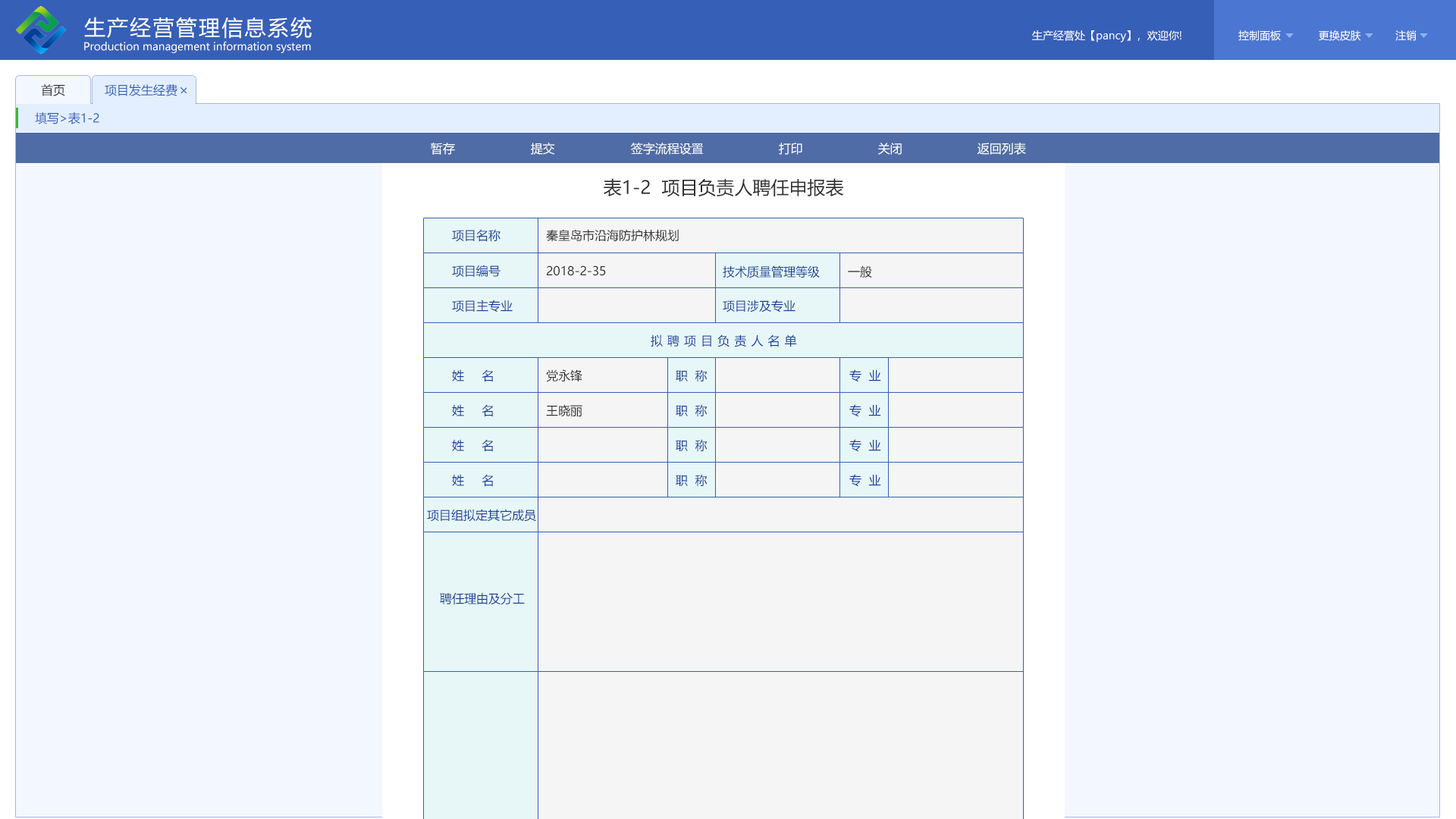
<style>
.page{position:relative;width:1456px;height:819px;background:#f3f7ff}
.page>*{position:absolute;margin:0}
.t1{font:21.2px "MicrosoftYaHei";letter-spacing:0.08em;color:#ffffff}
.t2{font:10.6px "MicrosoftYaHei";color:#ffffff}
.t3{font:12.1px "MicrosoftYaHei";color:#333333}
.t4{font:12.1px "MicrosoftYaHei";color:#365fb7}
.t5{font:12.1px "MicrosoftYaHei";color:#ffffff}
.t6{font:18.2px "MicrosoftYaHei";color:#313131}
.t7{font:12.1px "MicrosoftYaHei";color:#18419b}
.t8{font:12.1px "MicrosoftYaHei";color:#313131}
.t9{font:12.1px "MicrosoftYaHei";letter-spacing:0.38em;color:#18419b}
</style>
<div class="page">
<p class="t1" style="left:84px;top:17px;width:228px;height:22px">生产经营管理信息系统</p>
<p class="t2" style="left:84px;top:41px;width:227px;height:12px">Production management information system</p>
<p class="t2" style="left:1032px;top:30px;width:149px;height:12px">生产经营处【pancy】，欢迎你!</p>
<p class="t2" style="left:1238px;top:30px;width:179px;height:11px">控制面板            更换皮肤           注销</p>
<p class="t3" style="left:41px;top:84px;width:24px;height:12px">首页</p>
<p class="t4" style="left:105px;top:84px;width:72px;height:12px">项目发生经费</p>
<p class="t4" style="left:35px;top:112px;width:64px;height:12px">填写&gt;表1-2</p>
<p class="t5" style="left:431px;top:143px;width:24px;height:12px">暂存</p>
<p class="t5" style="left:531px;top:143px;width:24px;height:12px">提交</p>
<p class="t5" style="left:631px;top:143px;width:73px;height:12px">签字流程设置</p>
<p class="t5" style="left:779px;top:143px;width:23px;height:12px">打印</p>
<p class="t5" style="left:878px;top:143px;width:24px;height:12px">关闭</p>
<p class="t5" style="left:977px;top:143px;width:49px;height:12px">返回列表</p>
<p class="t6" style="left:604px;top:178px;width:240px;height:19px">表1-2  项目负责人聘任申报表</p>
<p class="t7" style="left:452px;top:229px;width:48px;height:13px">项目名称</p>
<p class="t8" style="left:546px;top:229px;width:133px;height:13px">秦皇岛市沿海防护林规划</p>
<p class="t7" style="left:452px;top:265px;width:48px;height:13px">项目编号</p>
<p class="t8" style="left:547px;top:265px;width:59px;height:11px">2018-2-35</p>
<p class="t7" style="left:723px;top:265px;width:97px;height:13px">技术质量管理等级</p>
<p class="t8" style="left:848px;top:265px;width:24px;height:13px">一般</p>
<p class="t7" style="left:452px;top:300px;width:61px;height:12px">项目主专业</p>
<p class="t7" style="left:723px;top:300px;width:72px;height:12px">项目涉及专业</p>
<p class="t9" style="left:651px;top:334px;width:146px;height:13px">拟聘项目负责人名单</p>
<p class="t7" style="left:452px;top:369px;width:41px;height:13px">姓     名</p>
<p class="t8" style="left:546px;top:369px;width:36px;height:13px">党永锋</p>
<p class="t7" style="left:676px;top:369px;width:32px;height:13px">职  称</p>
<p class="t7" style="left:849px;top:369px;width:32px;height:13px">专  业</p>
<p class="t7" style="left:452px;top:404px;width:41px;height:13px">姓     名</p>
<p class="t8" style="left:546px;top:404px;width:36px;height:13px">王晓丽</p>
<p class="t7" style="left:676px;top:404px;width:32px;height:13px">职  称</p>
<p class="t7" style="left:849px;top:404px;width:32px;height:13px">专  业</p>
<p class="t7" style="left:452px;top:439px;width:41px;height:13px">姓     名</p>
<p class="t7" style="left:676px;top:439px;width:32px;height:13px">职  称</p>
<p class="t7" style="left:849px;top:439px;width:32px;height:13px">专  业</p>
<p class="t7" style="left:452px;top:474px;width:41px;height:13px">姓     名</p>
<p class="t7" style="left:676px;top:474px;width:32px;height:13px">职  称</p>
<p class="t7" style="left:849px;top:474px;width:32px;height:13px">专  业</p>
<p class="t7" style="left:427px;top:509px;width:109px;height:13px">项目组拟定其它成员</p>
<p class="t7" style="left:440px;top:592px;width:85px;height:13px">聘任理由及分工</p>
</div>
